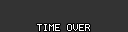
<style>
.page{position:relative;width:128px;height:32px;background:#333333}
.page>*{position:absolute;margin:0}
.t1{font:8px "Terminal";color:#ffffff}
</style>
<div class="page">
<p class="t1" style="left:37px;top:24px;width:53px;height:7px">TIME OVER</p>
</div>
